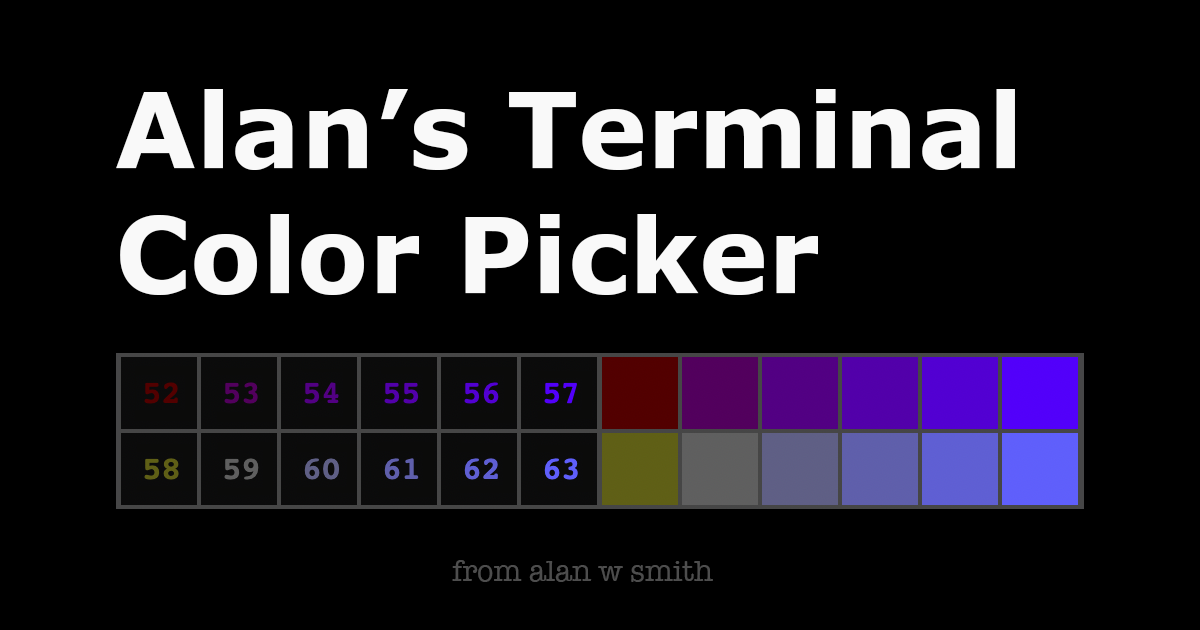
<style>
.page{position:relative;width:1200px;height:630px;background:#000000}
.page>*{position:absolute;margin:0}
.t1{font:104px "Verdana-Bold";color:#f9f9f9}
.t2{font:30px "AmericanTypewriter";color:#4d4d4d}
</style>
<div class="page">
<p class="t1" style="left:116px;top:89px;width:899px;height:206px">Alan’s Terminal<br>Color Picker</p>
<p class="t2" style="left:452px;top:560px;width:261px;height:22px">from alan w smith</p>
</div>
